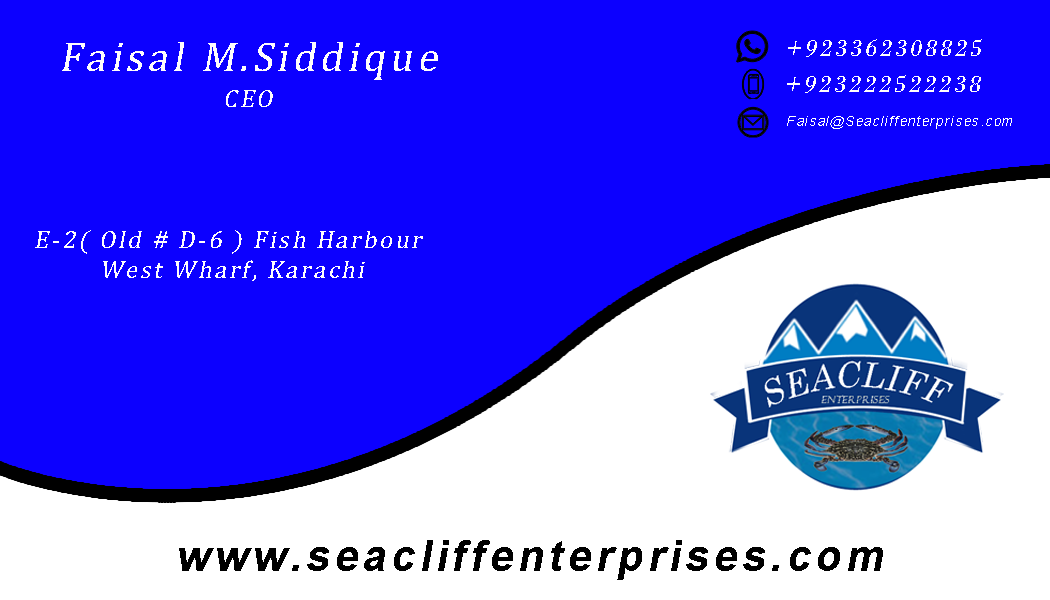
<style>
.page{position:relative;width:1050px;height:600px;background:#0c00ff}
.page>*{position:absolute;margin:0}
.t1{font:25.4px "BodoniMT";letter-spacing:0.1em;color:#fffdfd;font-style:italic}
.t2{font:41.7px "CambriaMath";letter-spacing:0.1em;color:#fffdfd;font-style:italic}
.t3{font:25px "CambriaMath";letter-spacing:0.1em;color:#fffdfd;font-style:italic}
.t4{font:13.5px "ArialMT";letter-spacing:0.1em;color:#ffffff;font-style:italic}
.t5{font:43.2px "Arial-BoldMT";letter-spacing:0.1em;color:#000000;font-style:italic}
</style>
<div class="page">
<p class="t1" style="left:788px;top:39px;width:194px;height:18px">+923362308825</p>
<p class="t2" style="left:62px;top:42px;width:376px;height:38px">Faisal M.Siddique</p>
<p class="t1" style="left:787px;top:75px;width:194px;height:18px">+923222522238</p>
<p class="t3" style="left:226px;top:90px;width:47px;height:17px">CEO</p>
<p class="t4" style="left:787px;top:116px;width:225px;height:13px">Faisal@Seacliffenterprises.com</p>
<p class="t3" style="left:35px;top:230px;width:388px;height:51px;text-align:center">E-2( Old # D-6 ) Fish Harbour <br>West Wharf, Karachi</p>
<p class="t5" style="left:179px;top:540px;width:704px;height:40px">www.seacliffenterprises.com</p>
</div>
